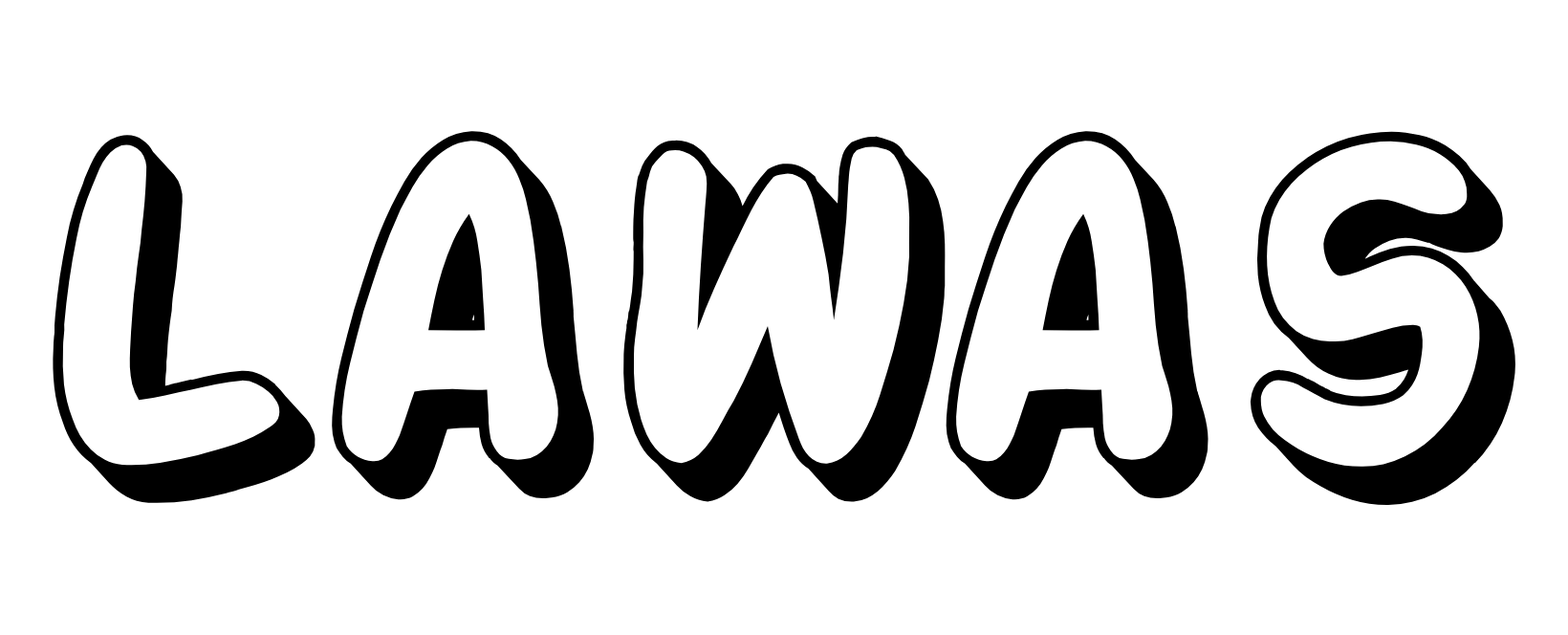
<style>
.page{position:relative;width:1568px;height:635px;background:#ffffff}
.page>*{position:absolute;margin:0}
.t1{font:473.5px "ActionManShaded";color:#000000}
</style>
<div class="page">
<p class="t1" style="left:53px;top:131px;width:1462px;height:374px">Lawas</p>
</div>
